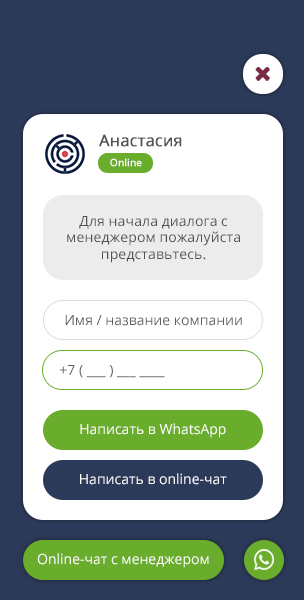
<style>
.page{position:relative;width:304px;height:600px;background:#2c3a59}
.page>*{position:absolute;margin:0}
.t1{font:16px "OpenSans";color:#545150;font-weight:bold}
.t2{font:10px "OpenSans";color:#ffffff;font-weight:bold}
.t3{font:14px "OpenSans";color:#545150}
.t4{font:14px "OpenSans";color:#615e5e}
.t5{font:14px "OpenSans";color:#ffffff}
</style>
<div class="page">
<p class="t1" style="left:99px;top:134px;width:83px;height:13px">Анастасия</p>
<p class="t2" style="left:110px;top:158px;width:32px;height:9px">Online</p>
<p class="t3" style="left:67px;top:216px;width:173px;height:47px;text-align:center">Для начала диалога с менеджером пожалуйста представьтесь.</p>
<p class="t4" style="left:65px;top:315px;width:177px;height:11px">Имя / название компании</p>
<p class="t4" style="left:60px;top:365px;width:105px;height:13px">+7 ( ___ ) ___ ____</p>
<p class="t5" style="left:80px;top:423px;width:146px;height:15px">Написать в WhatsApp</p>
<p class="t5" style="left:80px;top:473px;width:147px;height:12px">Написать в online-чат</p>
<p class="t5" style="left:37px;top:553px;width:172px;height:15px">Online-чат c менеджером</p>
</div>
